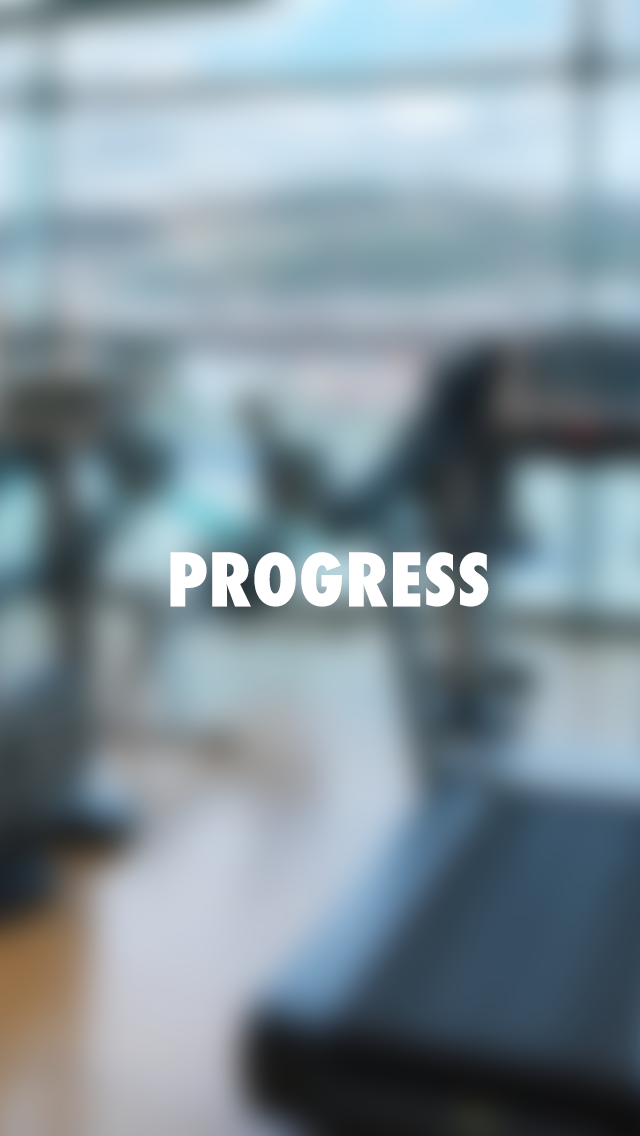
<style>
.page{position:relative;width:640px;height:1136px}
.page>*{position:absolute;margin:0}
.t1{font:72px "Futura-CondensedExtraBold";letter-spacing:0.01em;color:#ffffff}
</style>
<div class="page">
<p class="t1" style="left:170px;top:552px;width:319px;height:55px">PROGRESS</p>
</div>
